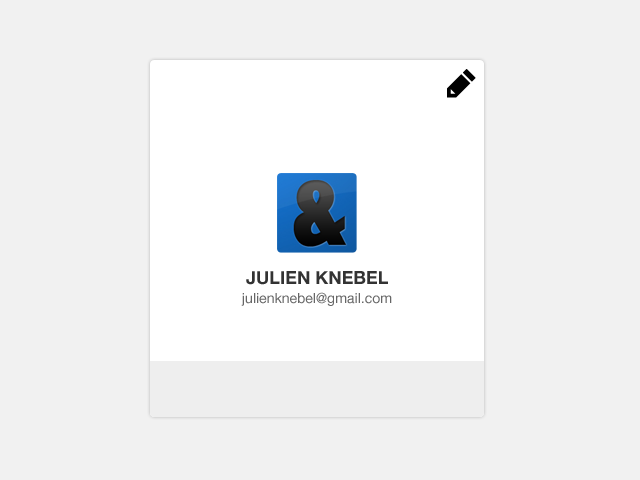
<style>
.page{position:relative;width:640px;height:480px;background:#f1f1f1}
.page>*{position:absolute;margin:0}
.t1{font:18px "HelveticaNeue-Bold";color:#333333;text-transform:uppercase}
.t2{font:14px "HelveticaNeue";color:#666666}
</style>
<div class="page">
<p class="t1" style="left:246px;top:271px;width:142px;height:14px">Julien Knebel</p>
<p class="t2" style="left:241px;top:292px;width:151px;height:14px">julienknebel@gmail.com</p>
</div>
